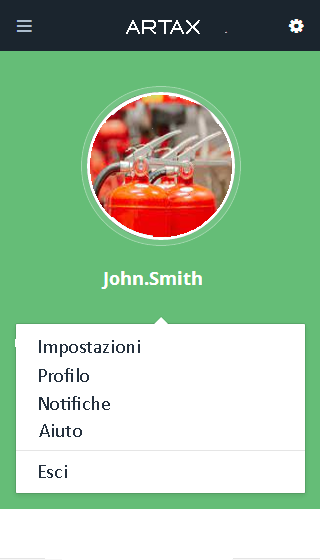
<style>
.page{position:relative;width:320px;height:560px;background:#65bd77}
.page>*{position:absolute;margin:0}
.t1{font:20px "QueentalBold";color:#ffffff}
.t2{font:20px "Calibri";color:#25313e}
</style>
<div class="page">
<p class="t1" style="left:126px;top:20px;width:74px;height:14px">ARTAX</p>
<p class="t2" style="left:39px;top:340px;width:101px;height:17px">Impostazioni</p>
<p class="t2" style="left:39px;top:368px;width:50px;height:14px">Profilo</p>
<p class="t2" style="left:39px;top:396px;width:71px;height:14px">Notifiche</p>
<p class="t2" style="left:39px;top:424px;width:43px;height:13px">Aiuto</p>
<p class="t2" style="left:39px;top:465px;width:28px;height:13px">Esci</p>
</div>
